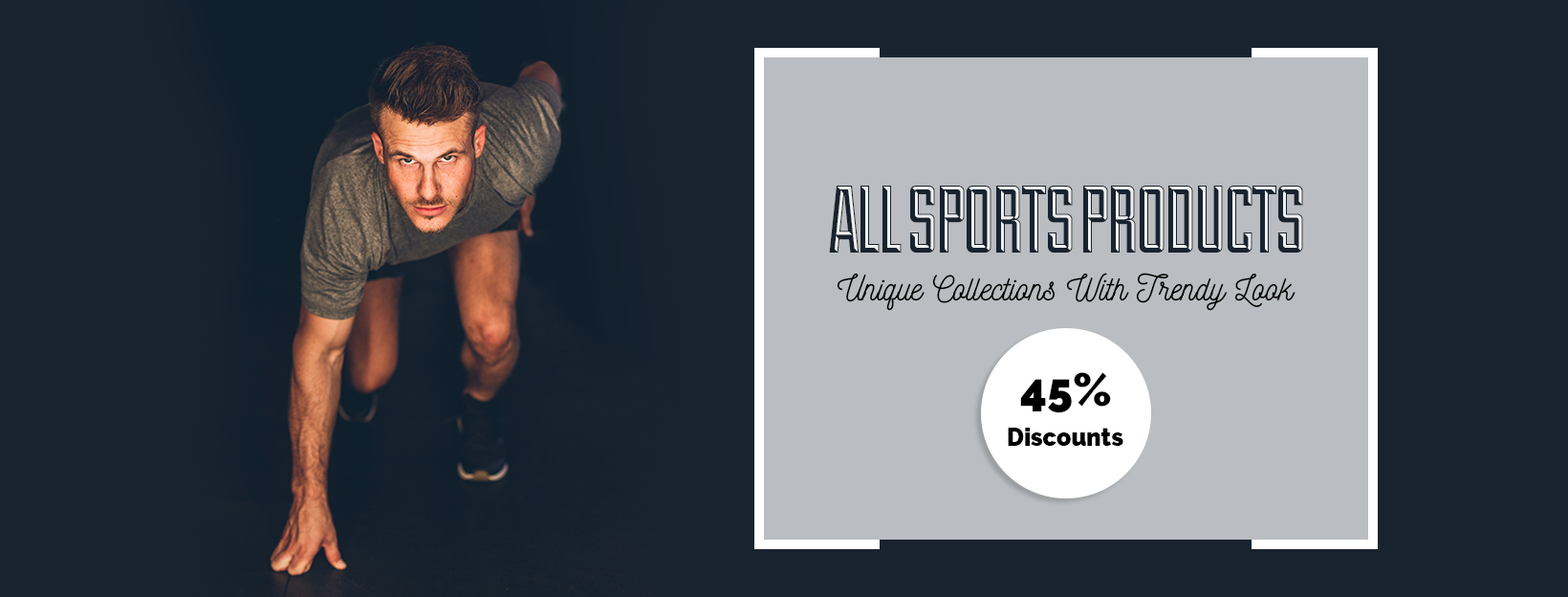
<style>
.page{position:relative;width:1568px;height:597px;background:#19232f}
.page>*{position:absolute;margin:0}
.t1{font:95.6px "Duke-Fill";letter-spacing:-0.03em;text-transform:uppercase}
.t2{font:95.6px "Duke-Shadow";letter-spacing:-0.03em;color:#ffffff;text-transform:uppercase}
.t3{font:34.4px "Nickainley-Normal";color:#000000}
.t4{font:45.9px "Raleway-Black";color:#000000}
.t5{font:23.9px "Raleway-Black";color:#000000}
</style>
<div class="page">
<p class="t1" style="left:829px;top:185px;width:474px;height:67px">All Sports Products</p>
<p class="t2" style="left:835px;top:186px;width:467px;height:65px;opacity:0.9">All Sports Products</p>
<p class="t3" style="left:837px;top:272px;width:459px;height:39px">Unique Collections With Trendy Look</p>
<p class="t4" style="left:1020px;top:372px;width:91px;height:41px">45%</p>
<p class="t5" style="left:1008px;top:427px;width:115px;height:19px">Discounts</p>
</div>
